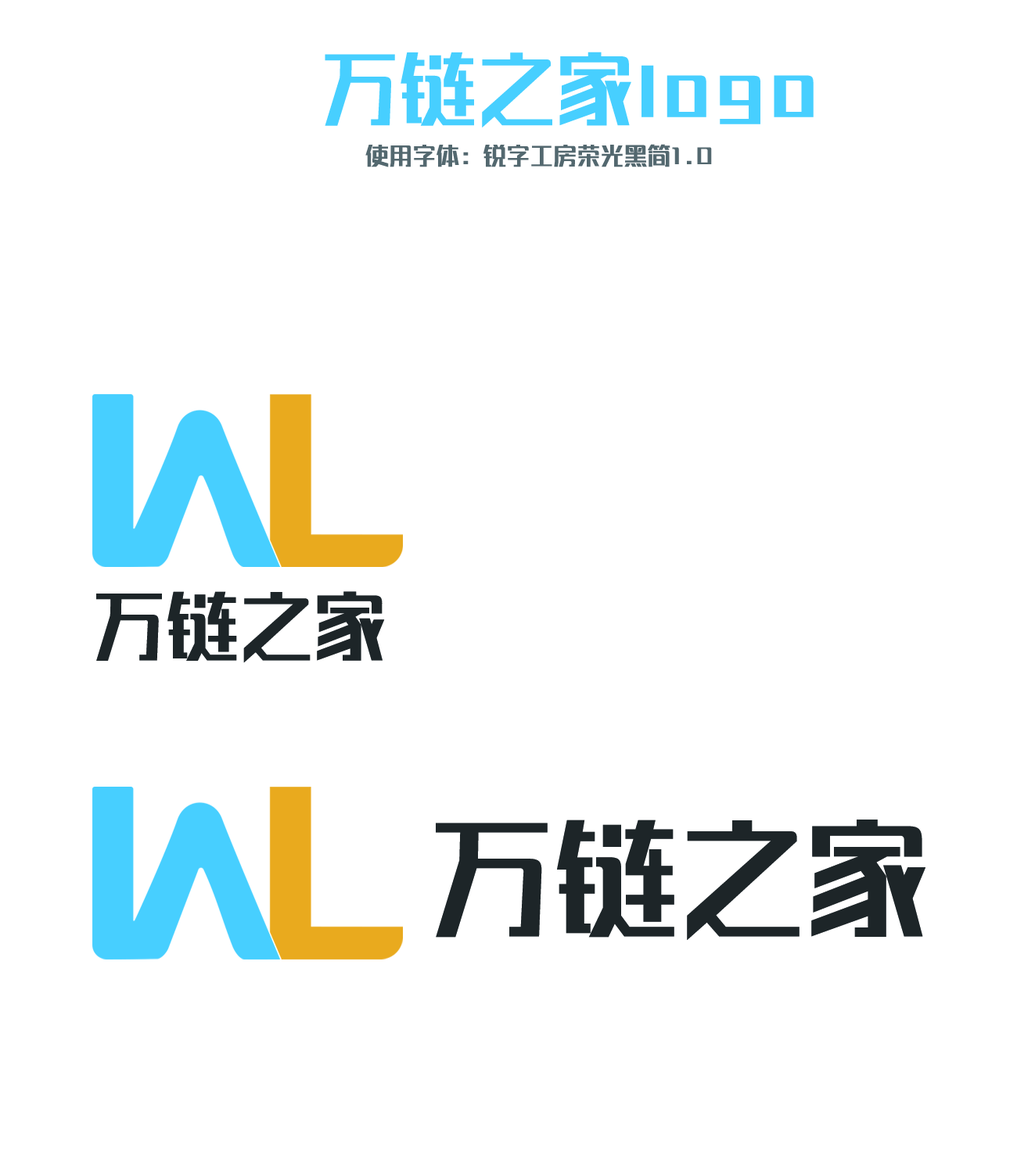
<style>
.page{position:relative;width:1017px;height:1173px;background:#ffffff}
.page>*{position:absolute;margin:0}
.t1{font:78.2px "REEJIi-Sun-BoldGBV1.0-Regular";color:#47cfff}
.t2{font:23.5px "REEJIi-Sun-BoldGBV1.0-Regular";color:#53676f}
.t3{font:73.6px "REEJIi-Sun-BoldGBV1.0-Regular";color:#1d2528}
.t4{font:125.1px "REEJIi-Sun-BoldGBV1.0-Regular";color:#1d2528}
</style>
<div class="page">
<p class="t1" style="left:325px;top:52px;width:488px;height:75px">万链之家logo</p>
<p class="t2" style="left:365px;top:144px;width:347px;height:23px">使用字体：锐字工房荣光黑简1.0</p>
<p class="t3" style="left:96px;top:591px;width:289px;height:72px">万链之家</p>
<p class="t4" style="left:436px;top:820px;width:489px;height:120px">万链之家</p>
</div>
